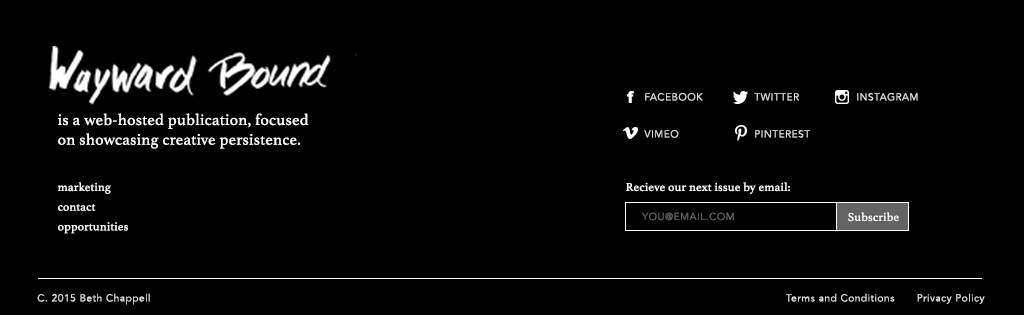
<style>
.page{position:relative;width:1024px;height:315px;background:#000000}
.page>*{position:absolute;margin:0}
.t1{font:10px "AvenirLTStd-Book";letter-spacing:0.058em;color:#dfdfdf}
.t2{font:16px/19.7px "Athelas-Regular";letter-spacing:0.02em;color:#ffffff}
.t3{font:12px/19.7px "Athelas-Regular";letter-spacing:0.02em;color:#ffffff}
.t4{font:12px "Athelas-Regular";letter-spacing:0.02em;color:#ffffff}
.t5{font:10px "AvenirLTStd-Book";letter-spacing:0.058em;color:#636363}
</style>
<div class="page">
<p class="t1" style="left:645px;top:93px;width:58px;height:8px">FACEBOOK</p>
<p class="t1" style="left:754px;top:93px;width:45px;height:8px">TWITTER</p>
<p class="t1" style="left:857px;top:93px;width:61px;height:8px">INSTAGRAM</p>
<p class="t2" style="left:58px;top:113px;width:251px;height:36px">is a web-hosted publication, focused<br>on showcasing creative persistence.</p>
<p class="t1" style="left:644px;top:130px;width:35px;height:8px">VIMEO</p>
<p class="t1" style="left:755px;top:130px;width:55px;height:8px">PINTEREST</p>
<p class="t3" style="left:58px;top:182px;width:70px;height:52px">marketing <br>contact<br>opportunities</p>
<p class="t4" style="left:626px;top:182px;width:164px;height:12px">Recieve our next issue by email:</p>
<p class="t5" style="left:642px;top:212px;width:92px;height:9px">YOU@EMAIL.COM</p>
<p class="t4" style="left:848px;top:212px;width:51px;height:10px">Subscribe</p>
<p class="t1" style="left:37px;top:293px;width:113px;height:12px">C. 2015 Beth Chappell</p>
<p class="t1" style="left:786px;top:293px;width:109px;height:9px">Terms and Conditions</p>
<p class="t1" style="left:917px;top:293px;width:68px;height:11px">Privacy Policy</p>
</div>
